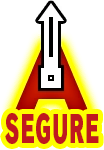
<style>
.page{position:relative;width:104px;height:150px;background:#ffffff}
.page>*{position:absolute;margin:0}
.t1{font:37.3px "RodinNTLGPro-UB";color:#c0191f;scale:0.56 1}
</style>
<div class="page">
<p class="t1" style="left:5px;top:113px;width:94px;height:31px">SEGURE</p>
</div>
